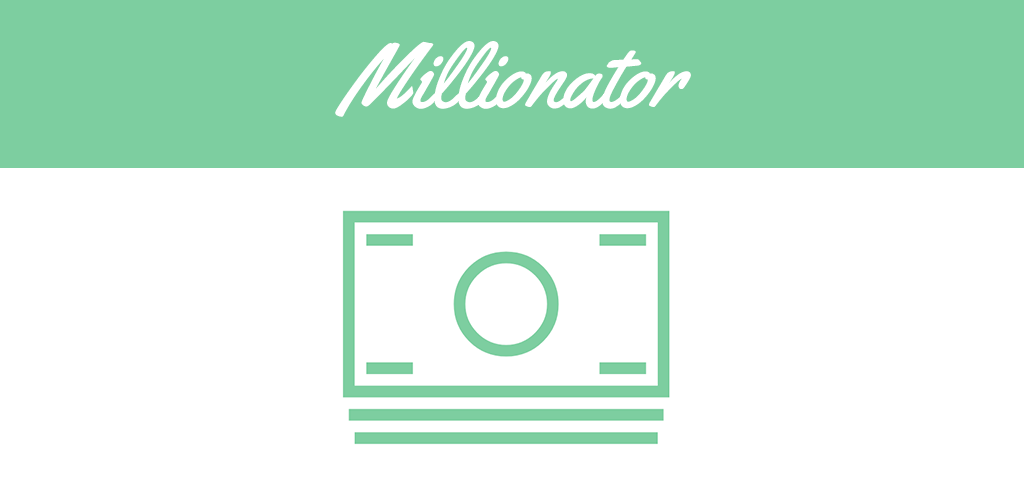
<style>
.page{position:relative;width:1024px;height:500px;background:#ffffff}
.page>*{position:absolute;margin:0}
.t1{font:90px "Yellowtail-Regular";color:#ffffff}
</style>
<div class="page">
<p class="t1" style="left:335px;top:41px;width:356px;height:76px">Millionator</p>
</div>
